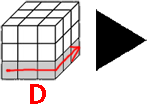
<style>
.page{position:relative;width:162px;height:108px;background:#ffffff}
.page>*{position:absolute;margin:0}
.t1{font:27px "MyriadPro-Regular";color:#ff0000;font-weight:bold}
</style>
<div class="page">
<p class="t1" style="left:30px;top:84px;width:16px;height:20px">D</p>
</div>
